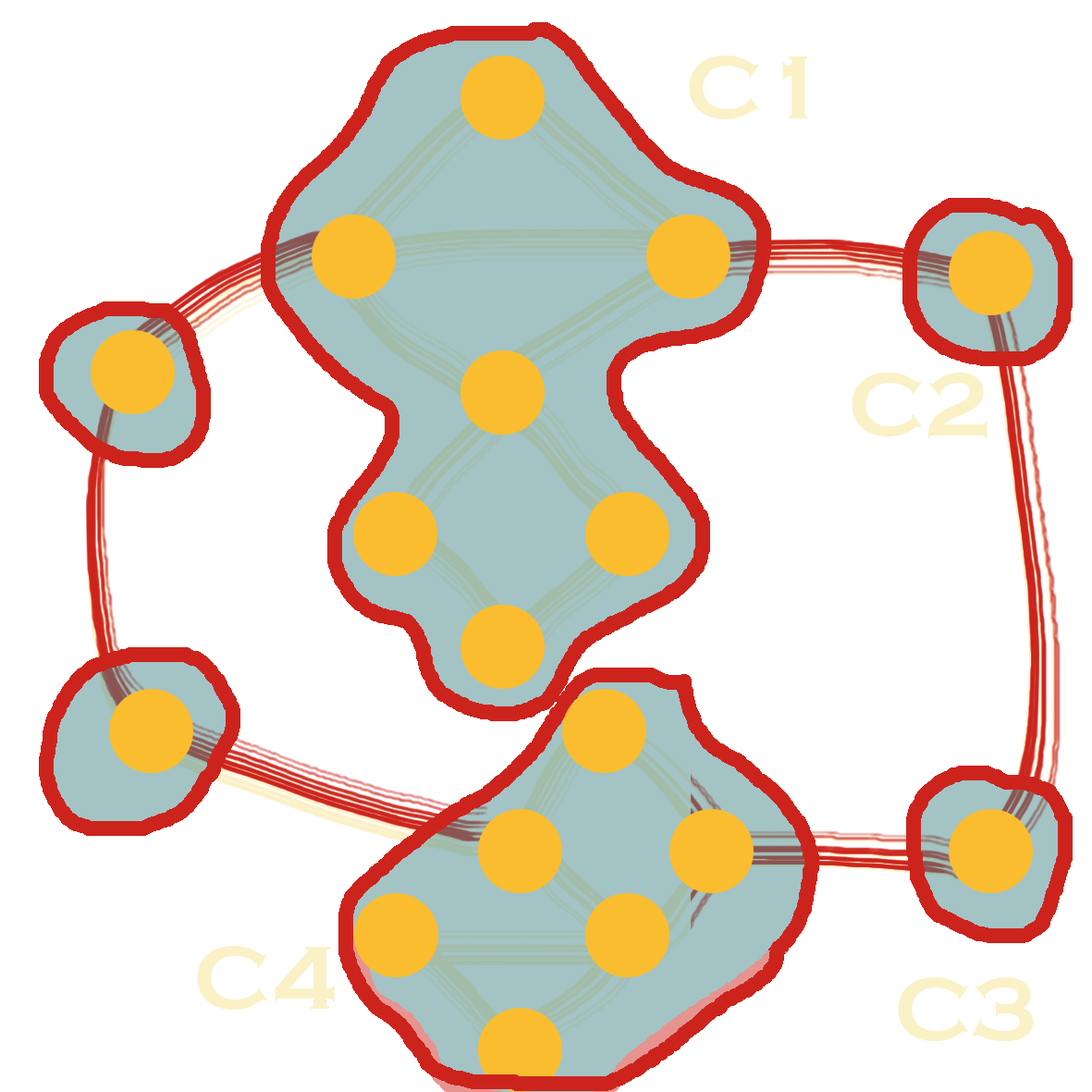
<style>
.page{position:relative;width:1092px;height:1092px;background:#ffffff}
.page>*{position:absolute;margin:0}
.t1{font:92.5px "CopperplateGothic-Bold";color:#fbf1c7}
</style>
<div class="page">
<p class="t1" style="left:689px;top:55px;width:119px;height:64px">C1</p>
<p class="t1" style="left:852px;top:373px;width:136px;height:65px">C2</p>
<p class="t1" style="left:197px;top:946px;width:138px;height:64px">C4</p>
<p class="t1" style="left:898px;top:977px;width:136px;height:64px">C3</p>
</div>
